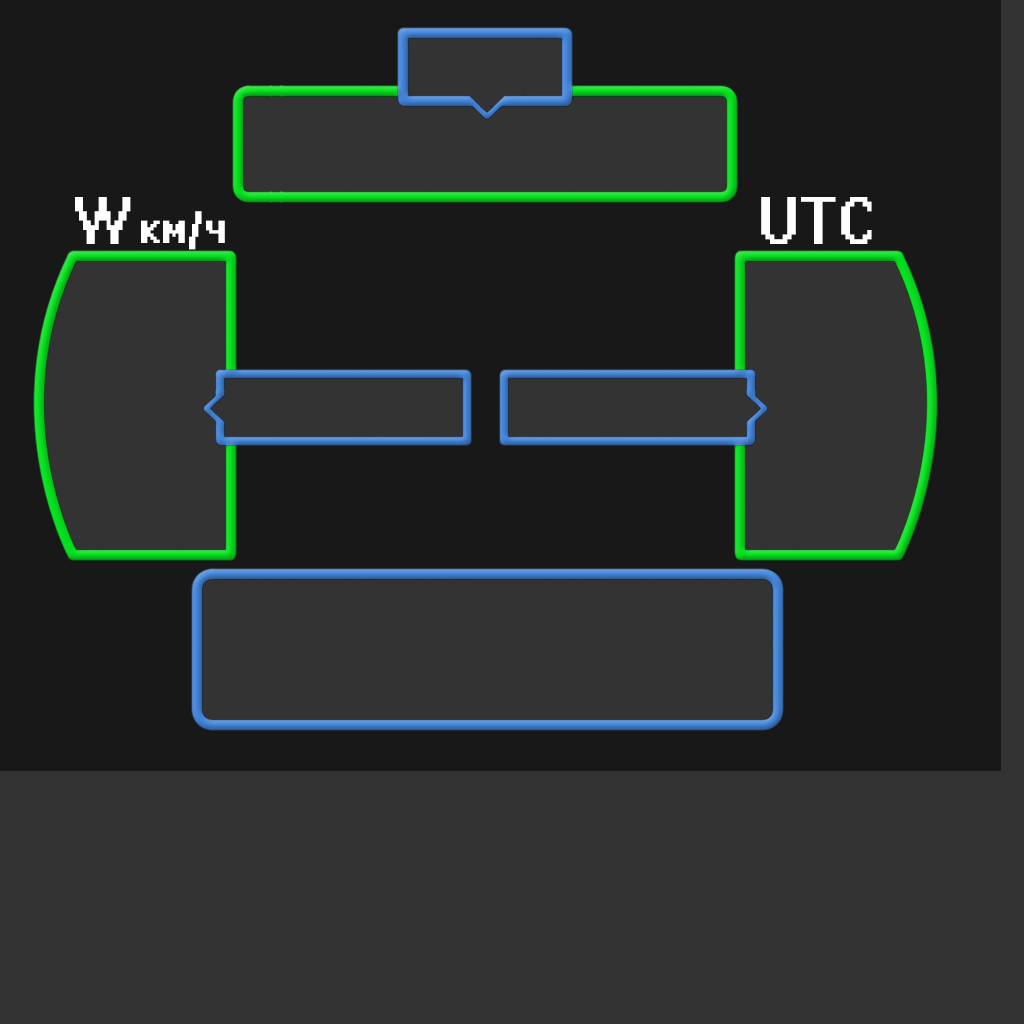
<style>
.page{position:relative;width:1024px;height:1024px;background:#333333}
.page>*{position:absolute;margin:0}
.t1{font:60px "System";letter-spacing:0.025em;color:#ffffff;scale:0.84 1}
.t2{font:60px "System";letter-spacing:0.025em;color:#ffffff;scale:0.92 1}
.t3{font:40.6px "System";letter-spacing:0.025em;color:#ffffff}
</style>
<div class="page">
<p class="t1" style="left:75px;top:197px;width:56px;height:47px">W</p>
<p class="t2" style="left:761px;top:197px;width:111px;height:47px">UTC</p>
<p class="t3" style="left:141px;top:211px;width:84px;height:39px">км/ч</p>
</div>
